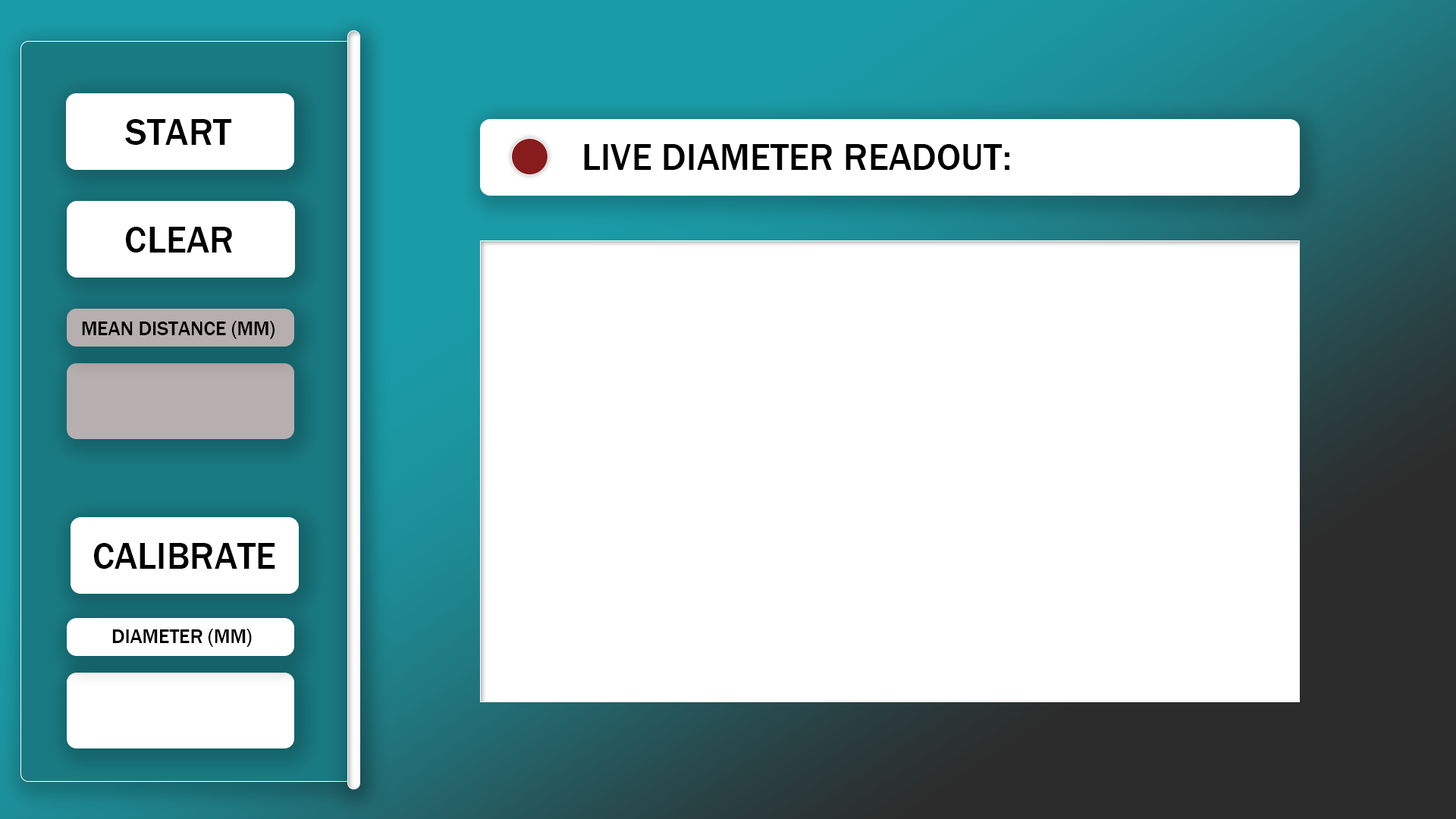
<style>
.page{position:relative;width:1456px;height:819px;background:#ffffff}
.page>*{position:absolute;margin:0}
.t1{font:38.2px "FranklinGothic-Medium";color:#000000}
.t2{font:20.2px "FranklinGothic-Medium";color:#000000}
</style>
<div class="page">
<p class="t1" style="left:125px;top:119px;width:107px;height:26px">START</p>
<p class="t1" style="left:584px;top:144px;width:425px;height:26px">LIVE DIAMETER READOUT:</p>
<p class="t1" style="left:125px;top:227px;width:107px;height:26px">CLEAR</p>
<p class="t2" style="left:82px;top:321px;width:193px;height:18px">MEAN DISTANCE (MM)</p>
<p class="t1" style="left:93px;top:543px;width:182px;height:26px">CALIBRATEVV</p>
<p class="t2" style="left:112px;top:629px;width:140px;height:18px">DIAMETER (MM)</p>
</div>
